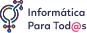
<style>
.page{position:relative;width:87px;height:33px;background:#ffffff}
.page>*{position:absolute;margin:0}
.t1{font:11.2px "Linotte-SemiBold";color:#2c2c54}
.t2{font:11.2px "Linotte-SemiBold";color:#e91e63}
</style>
<div class="page">
<p class="t1" style="left:28px;top:7px;width:59px;height:25px">Informática<br>Para Tod<span class="t2">@</span>s</p>
</div>
